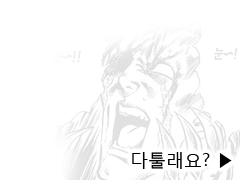
<style>
.page{position:relative;width:240px;height:180px;background:#ffffff}
.page>*{position:absolute;margin:0}
.t1{font:18px "MalgunGothicRegular";color:#000000}
</style>
<div class="page">
<p class="t1" style="left:132px;top:152px;width:100px;height:17px">다툴래요? ▶</p>
</div>
